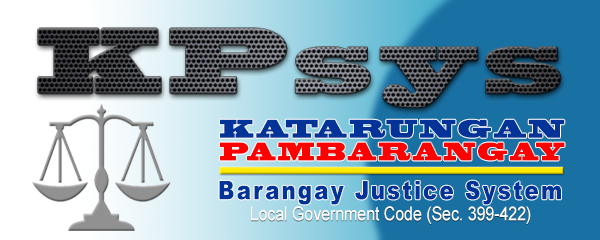
<style>
.page{position:relative;width:600px;height:240px}
.page>*{position:absolute;margin:0}
.t1{font:86.5px "BlackoakStd";letter-spacing:0.1em;scale:0.76 1}
.t2{font:23.9px "BlackoakStd";letter-spacing:0.1em;color:#013399;scale:0.75 1}
.t3{font:23.9px "BlackoakStd";letter-spacing:0.1em;color:#fe0000;scale:0.67 1}
.t4{font:25.6px "Arial-Black";letter-spacing:0.1em;color:#013399;scale:0.83 1}
.t5{font:19.3px "ArialMT";color:#ffffff;scale:0.82 1}
</style>
<div class="page">
<p class="t1" style="left:38px;top:28px;width:523px;height:80px">KPsys</p>
<p class="t2" style="left:220px;top:119px;width:345px;height:19px">KATARUNGAN</p>
<p class="t3" style="left:219px;top:142px;width:346px;height:19px">PAMBARANGAY</p>
<p class="t4" style="left:219px;top:180px;width:342px;height:25px">Barangay Justice System</p>
<p class="t5" style="left:251px;top:206px;width:280px;height:18px">Local Government Code (Sec. 399-422)</p>
</div>
